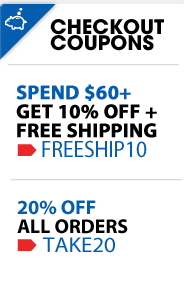
<style>
.page{position:relative;width:184px;height:291px;background:#ffffff}
.page>*{position:absolute;margin:0}
.t1{font:20px "AvantGarde-Bold";color:#000000;text-transform:uppercase}
.t2{font:20px/19px "MyriadPro-Bold";color:#000000;text-transform:uppercase;font-weight:bold}
.t3{font:20px/19px "MyriadPro-Bold";color:#055daf;text-transform:uppercase;font-weight:bold}
.t4{font:23.6px "MyriadPro-Regular";color:#055daf;text-transform:uppercase;scale:0.91 1}
.t5{font:20px/19px "MyriadPro-Bold";color:#000000;text-transform:uppercase}
.t6{font:20px/19px "MyriadPro-Bold";color:#055daf;text-transform:uppercase}
.t7{font:21.6px "MyriadPro-Regular";color:#055daf;text-transform:uppercase;scale:1.06 1}
</style>
<div class="page">
<p class="t1" style="left:50px;top:19px;width:114px;height:16px">Checkout</p>
<p class="t1" style="left:50px;top:35px;width:104px;height:16px">cOUPONS</p>
<p class="t2" style="left:16px;top:84px;width:141px;height:54px"><span class="t3">Spend $60+<br></span>get 10% off +<br>free shipping</p>
<p class="t4" style="left:42px;top:140px;width:105px;height:18px">freeship10</p>
<p class="t5" style="left:17px;top:200px;width:111px;height:34px"><span class="t6">20% OFF <br></span>ALL ORDERS</p>
<p class="t7" style="left:43px;top:237px;width:72px;height:16px">TAKE20</p>
</div>
